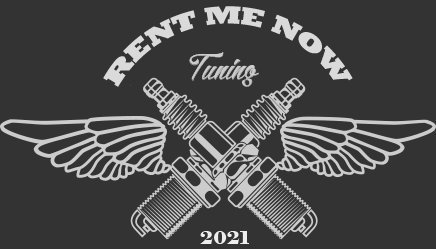
<style>
.page{position:relative;width:436px;height:249px;background:#333333}
.page>*{position:absolute;margin:0}
.t1{font:25px "Rockwell-ExtraBold";color:#dadada}
.t2{font:18px "Elephant-Regular";color:#eeeeee}
</style>
<div class="page">
<p class="t1" style="left:103px;top:6px;width:250px;height:81px">RENT ME NOW</p>
<p class="t2" style="left:200px;top:231px;width:49px;height:13px">2021</p>
</div>
